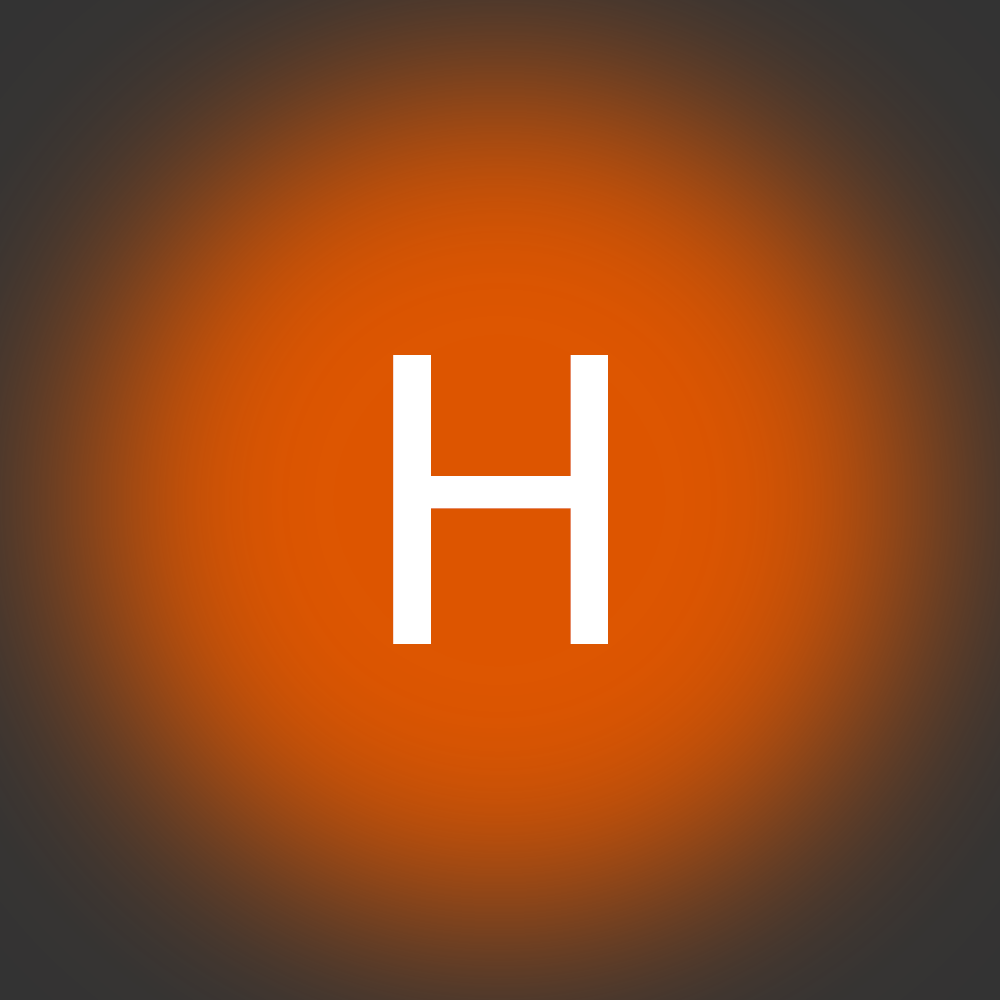
<style>
.page{position:relative;width:1000px;height:1000px}
.page>*{position:absolute;margin:0}
.t1{font:600px "MyriadArabic-Regular";color:#ffffff}
</style>
<div class="page">
<p class="t1" style="left:393px;top:355px;width:215px;height:289px">H</p>
</div>
